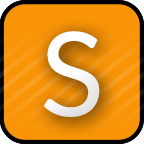
<style>
.page{position:relative;width:144px;height:144px;background:#f89406}
.page>*{position:absolute;margin:0}
.t1{font:116.7px "Lato-Regular";color:#ffffff}
</style>
<div class="page">
<p class="t1" style="left:44px;top:31px;width:56px;height:86px">S</p>
</div>
